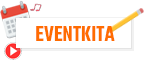
<style>
.page{position:relative;width:147px;height:66px;background:#ffffff}
.page>*{position:absolute;margin:0}
.t1{font:24.1px "Teko-SemiBold";color:#ff6c00;scale:0.88 1}
</style>
<div class="page">
<p class="t1" style="left:36px;top:26px;width:79px;height:15px">EVENTKITA</p>
</div>
